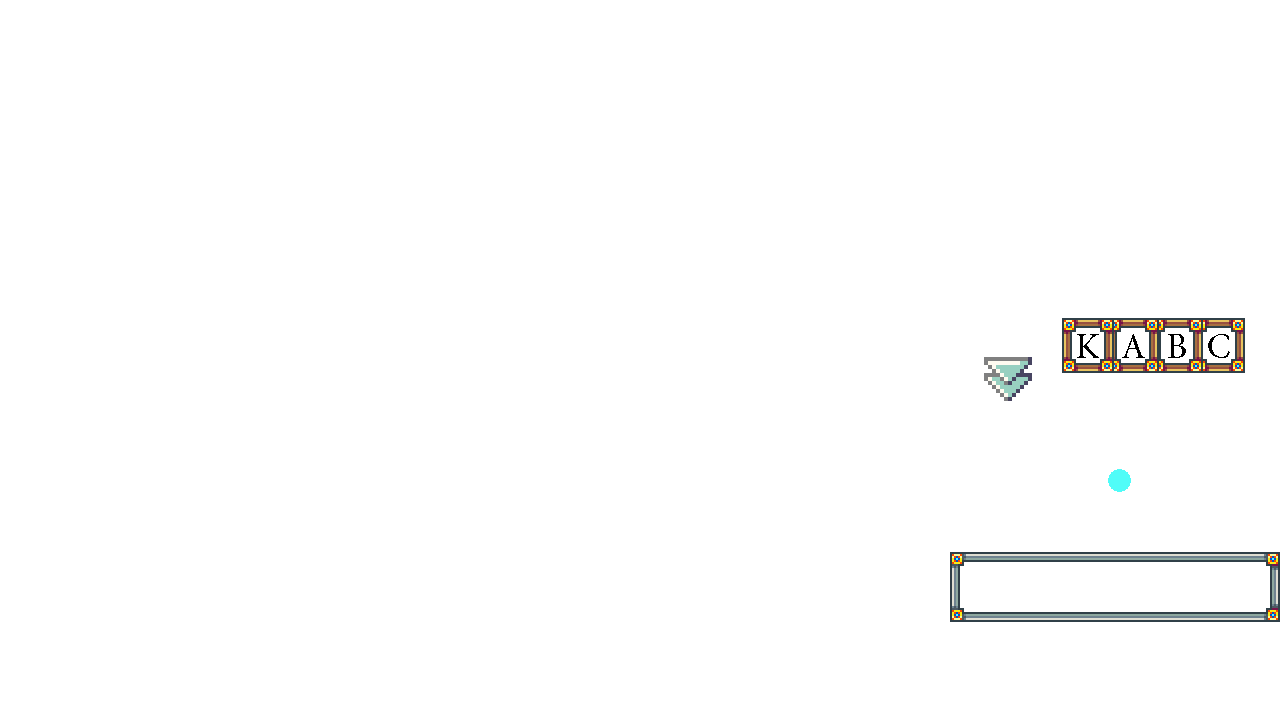
<style>
.page{position:relative;width:1280px;height:720px;background:#ffffff}
.page>*{position:absolute;margin:0}
.t1{font:36px "MinionPro-Regular";color:#000000}
</style>
<div class="page">
<p class="t1" style="left:1077px;top:334px;width:22px;height:24px">K</p>
<p class="t1" style="left:1122px;top:334px;width:23px;height:24px">A</p>
<p class="t1" style="left:1168px;top:334px;width:18px;height:24px">B</p>
<p class="t1" style="left:1208px;top:334px;width:22px;height:24px">C</p>
</div>
